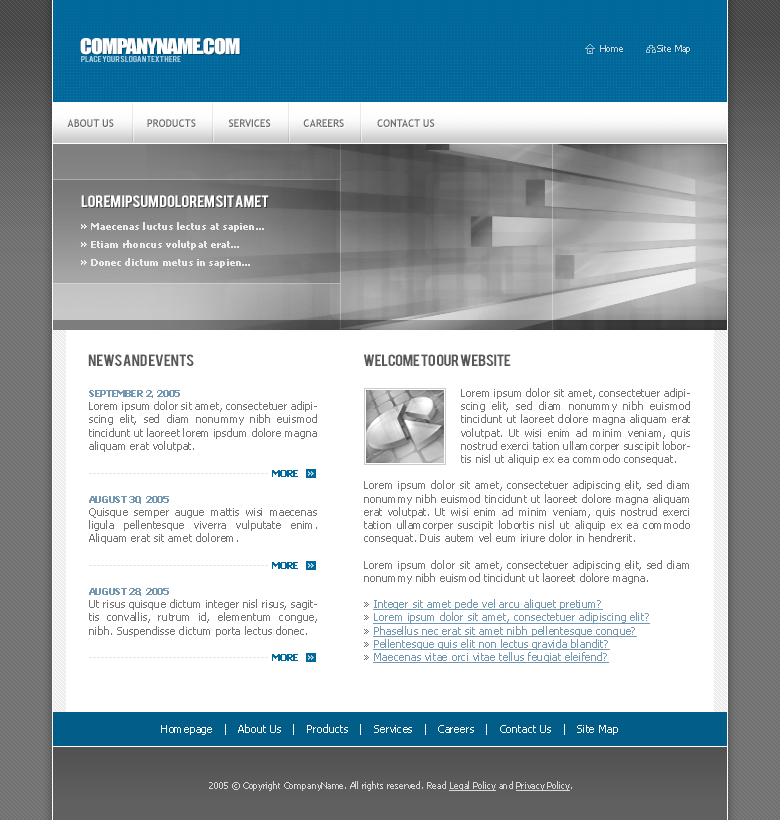
<style>
.page{position:relative;width:780px;height:820px;background:#ffffff}
.page>*{position:absolute;margin:0}
.t1{font:20px "Impact";letter-spacing:-0.05em;color:#ffffff;text-transform:uppercase;scale:1.1 1}
.t2{font:9px "Tahoma";color:#cbd9e4}
.t3{font:6.8px "Bebas";color:#b2d6eb;text-transform:uppercase;scale:1.18 1}
.t4{font:11px "TrebuchetMS-Bold";color:#6e6e6e;text-transform:uppercase;scale:0.9 1}
.t5{font:12.8px "Bebas";letter-spacing:-0.025em;color:#ffffff;text-transform:uppercase;scale:1.18 1}
.t6{font:10px/18px "Tahoma-Bold";color:#ffffff}
.t7{font:12.8px "Bebas";letter-spacing:-0.025em;color:#585858;text-transform:uppercase;scale:1.18 1}
.t8{font:11px "Tahoma";color:#737373}
.t9{font:9px "Tahoma-Bold";color:#737373;text-transform:uppercase}
.t10{font:11px "Tahoma"}
.t11{font:11px "Tahoma";text-decoration:underline}
.t12{font:9px "Tahoma-Bold";color:#00689a}
.t13{font:11px "Tahoma";color:#ffffff}
.t14{font:9px "Tahoma";color:#d7d7d7}
.t15{font:9px "Tahoma";color:#d7d7d7;text-decoration:underline}
</style>
<div class="page">
<p class="t1" style="left:80px;top:38px;width:160px;height:17px">companyname.com</p>
<p class="t2" style="left:600px;top:45px;width:90px;height:9px">Home            Site Map</p>
<p class="t3" style="left:81px;top:56px;width:100px;height:6px">place your slogan text here</p>
<p class="t4" style="left:67px;top:119px;width:368px;height:8px">About Us           Products           Services           careers           Contact Us</p>
<p class="t5" style="left:81px;top:195px;width:188px;height:12px">Lorem Ipsum Dolorem Sit Amet</p>
<p class="t6" style="left:81px;top:222px;width:183px;height:46px;text-align:justify;opacity:0.8">» Maecenas luctus lectus at sapien...<br>» Etiam rhoncus volutpat erat...<br>» Donec dictum metus in sapien...</p>
<p class="t7" style="left:88px;top:354px;width:106px;height:12px">News and events</p>
<p class="t7" style="left:363px;top:354px;width:148px;height:12px">welcome to our website</p>
<p class="t8" style="left:89px;top:390px;width:228px;height:247px;text-align:justify"><span class="t9">September 2, 2005 <br></span>Lorem ipsum dolor sit amet, consectetuer adipiscing elit, sed diam nonummy nibh euismod tincidunt ut laoreet lorem ipsdum dolore magna aliquam erat volutpat.<br><br><br><br><span class="t9">August 30, 2005 <br></span>Quisque semper augue mattis wisi maecenas ligula pellentesque viverra vulputate enim. Aliquam erat sit amet dolorem.<br><br><br><br><span class="t9">August 28, 2005 <br></span>Ut risus quisque dictum integer nisl risus, sagittis convallis, rutrum id, elementum congue, nibh. Suspendisse dictum porta lectus donec.</p>
<p class="t10" style="left:364px;top:388px;width:326px;height:275px;text-align:justify">Lorem ipsum dolor sit amet, consectetuer adipiscing elit, sed diam nonummy nibh euismod tincidunt ut laoreet dolore magna aliquam erat volutpat. Ut wisi enim ad minim veniam, quis nostrud exerci tation ullamcorper suscipit lobortis nisl ut aliquip ex ea commodo consequat.<br><br>Lorem ipsum dolor sit amet, consectetuer adipiscing elit, sed diam nonummy nibh euismod tincidunt ut laoreet dolore magna aliquam erat volutpat. Ut wisi enim ad minim veniam, quis nostrud exerci tation ullamcorper suscipit lobortis nisl ut aliquip ex ea commodo consequat. Duis autem vel eum iriure dolor in hendrerit.<br><br>Lorem ipsum dolor sit amet, consectetuer adipiscing elit, sed diam nonummy nibh euismod tincidunt ut laoreet dolore magna. <br><br>» <span class="t11">Integer sit amet pede vel arcu aliquet pretium?<br></span>» <span class="t11">Lorem ipsum dolor sit amet, consectetuer adipiscing elit?<br></span>» <span class="t11">Phasellus nec erat sit amet nibh pellentesque congue?<br></span>» <span class="t11">Pellentesque quis elit non lectus gravida blandit?<br></span>» <span class="t11">Maecenas vitae orci vitae tellus feugiat eleifend?</span></p>
<p class="t12" style="left:272px;top:470px;width:26px;height:7px">MORE</p>
<p class="t12" style="left:272px;top:562px;width:26px;height:7px">MORE</p>
<p class="t12" style="left:272px;top:654px;width:26px;height:7px">MORE</p>
<p class="t13" style="left:161px;top:724px;width:457px;height:11px">Homepage   |   About Us   |   Products   |   Services   |   Careers   |   Contact Us   |   Site Map</p>
<p class="t14" style="left:209px;top:781px;width:363px;height:10px">2005 © Copyright CompanyName. All rights reserved. Read <span class="t15">Legal Policy</span> and <span class="t15">Privacy Policy</span>.</p>
</div>
